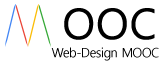
<style>
.page{position:relative;width:165px;height:64px;background:#ffffff}
.page>*{position:absolute;margin:0}
.t1{font:42px "MalgunGothicRegular";color:#000000;font-weight:bold}
.t2{font:13px "MalgunGothicRegular";letter-spacing:-0.04em;color:#000000}
</style>
<div class="page">
<p class="t1" style="left:64px;top:8px;width:91px;height:32px">OOC</p>
<p class="t2" style="left:51px;top:47px;width:108px;height:14px">Web-Design MOOC</p>
</div>
